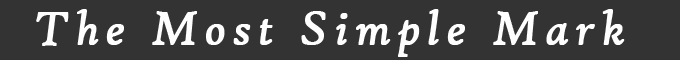
<style>
.page{position:relative;width:680px;height:60px;background:#333333}
.page>*{position:absolute;margin:0}
.t1{font:50px "HighTowerText-Italic";letter-spacing:0.12em;color:#fefefe;font-weight:bold}
</style>
<div class="page">
<p class="t1" style="left:36px;top:9px;width:589px;height:48px">The Most Simple Mark</p>
</div>
